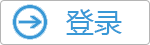
<style>
.page{position:relative;width:150px;height:45px;background:#ffffff}
.page>*{position:absolute;margin:0}
.t1{font:28px "MicrosoftYaHei";color:#3998d6}
</style>
<div class="page">
<p class="t1" style="left:66px;top:9px;width:56px;height:26px">登录</p>
</div>
